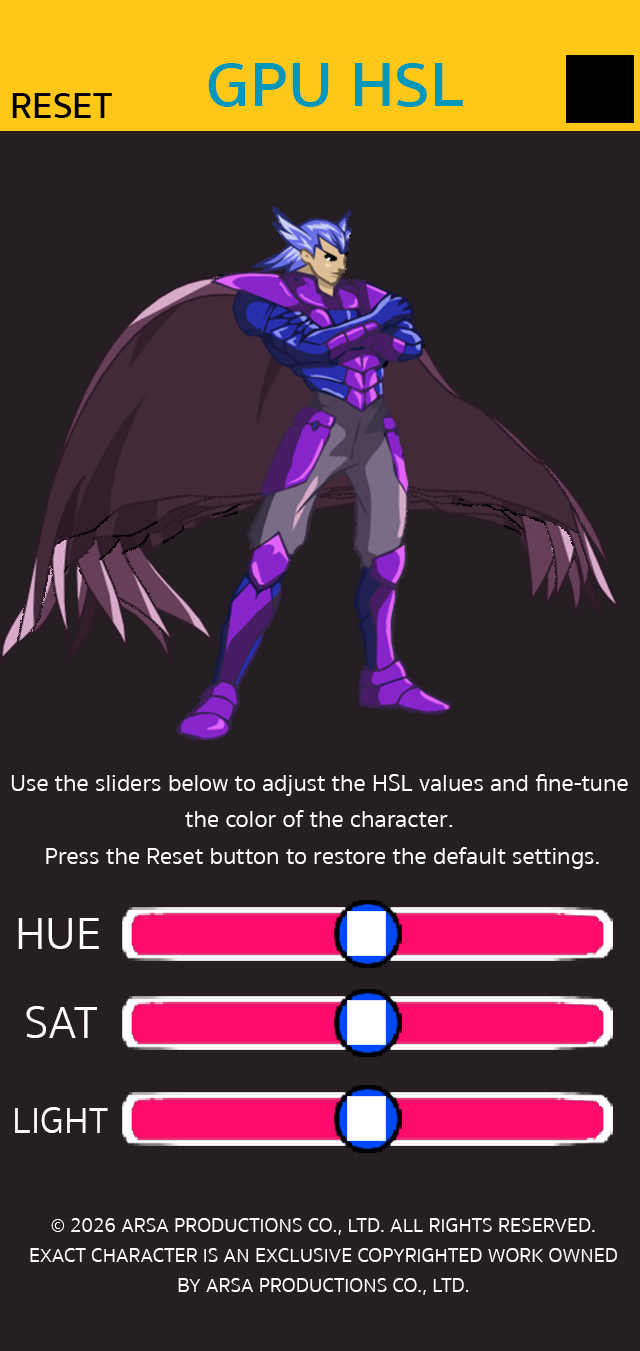
<style>
.page{position:relative;width:640px;height:1351px;background:#251f23}
.page>*{position:absolute;margin:0}
.t1{font:63.9px "SukhumvitSet-SemiBold";color:#0097b8;scale:1.05 1}
.t2{font:37.3px "SukhumvitSet-SemiBold";color:#000000}
.t3{font:24.1px/36.2px "SukhumvitSet-Light";color:#ffffff}
.t4{font:46.2px "SukhumvitSet-Light";color:#ffffff}
.t5{font:37.3px "SukhumvitSet-Light";color:#ffffff}
.t6{font:20.3px/30.4px "SukhumvitSet-Light";color:#ffffff}
</style>
<div class="page">
<p class="t1" style="left:208px;top:63px;width:255px;height:44px">GPU HSL</p>
<p class="t2" style="left:12px;top:93px;width:100px;height:25px">RESET</p>
<p class="t3" style="left:11px;top:774px;width:617px;height:95px;text-align:center">Use the sliders below to adjust the HSL values and fine-tune <br>the color of the character. <br>Press the Reset button to restore the default settings.</p>
<p class="t4" style="left:18px;top:918px;width:81px;height:31px">HUE</p>
<p class="t4" style="left:26px;top:1006px;width:71px;height:32px">SAT</p>
<p class="t5" style="left:15px;top:1107px;width:93px;height:26px">LIGHT</p>
<p class="t6" style="left:30px;top:1218px;width:587px;height:77px;text-align:center">© 2026 ARSA PRODUCTIONS CO., LTD. ALL RIGHTS RESERVED.<br>EXACT CHARACTER IS AN EXCLUSIVE COPYRIGHTED WORK OWNED<br>BY ARSA PRODUCTIONS CO., LTD.</p>
</div>
